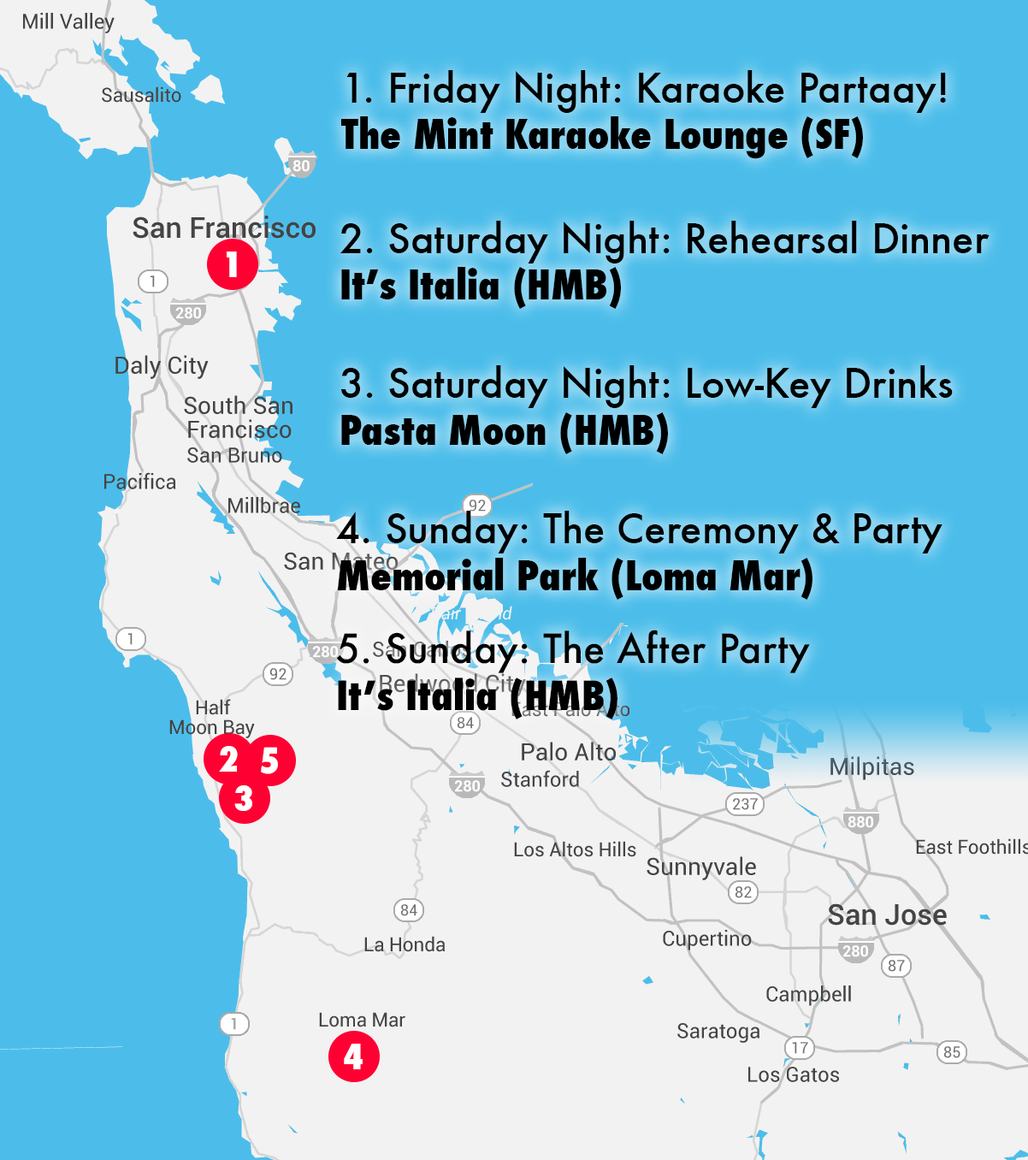
<style>
.page{position:relative;width:1028px;height:1160px;background:#4cbdea}
.page>*{position:absolute;margin:0}
.t1{font:39.1px "Futura-Medium";color:#000000}
.t2{font:39.1px "Futura-CondensedExtraBold";color:#000000}
.t3{font:34.2px "Futura-CondensedExtraBold";color:#ffffff}
</style>
<div class="page">
<p class="t1" style="left:341px;top:70px;width:605px;height:89px">1. Friday Night: Karaoke Partaay!<br><span class="t2">The Mint Karaoke Lounge (SF)</span></p>
<p class="t1" style="left:340px;top:221px;width:650px;height:88px">2. Saturday Night: Rehearsal Dinner<br><span class="t2">It’s Italia (HMB)</span></p>
<p class="t3" style="left:227px;top:251px;width:10px;height:26px">1</p>
<p class="t1" style="left:340px;top:365px;width:613px;height:89px">3. Saturday Night: Low-Key Drinks<br><span class="t2">Pasta Moon (HMB)</span></p>
<p class="t1" style="left:336px;top:511px;width:607px;height:89px">4. Sunday: The Ceremony &amp; Party<br><span class="t2">Memorial Park (Loma Mar)</span></p>
<p class="t1" style="left:336px;top:630px;width:474px;height:89px">5. Sunday: The After Party<br><span class="t2">It’s Italia (HMB)</span></p>
<p class="t3" style="left:219px;top:746px;width:19px;height:26px">2</p>
<p class="t3" style="left:261px;top:747px;width:17px;height:27px">5</p>
<p class="t3" style="left:234px;top:785px;width:18px;height:26px">3</p>
<p class="t3" style="left:344px;top:1044px;width:19px;height:25px">4</p>
</div>
